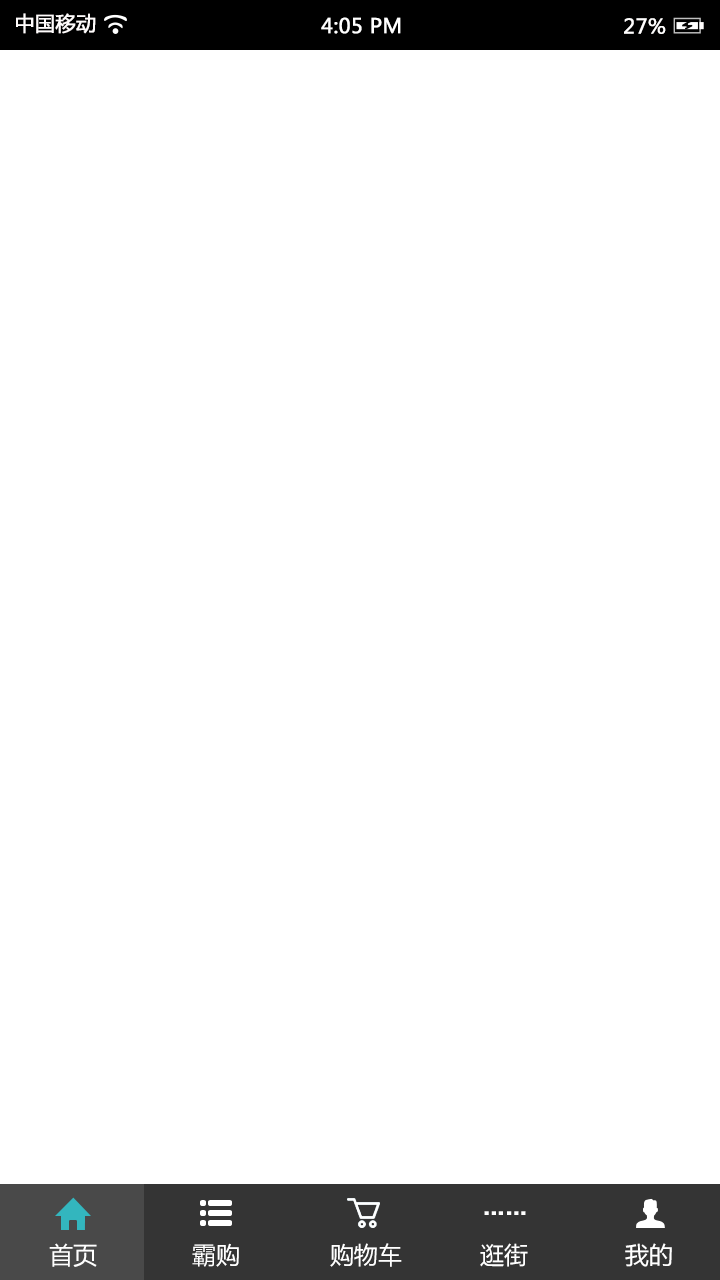
<style>
.page{position:relative;width:720px;height:1280px;background:#ffffff}
.page>*{position:absolute;margin:0}
.t1{font:20px "MicrosoftYaHei";color:#fffcfc;font-weight:bold}
.t2{font:20px "MicrosoftYaHei";color:#ffffff;font-weight:bold}
.t3{font:20px "MicrosoftYaHei";color:#fffefe;font-weight:bold}
.t4{font:24px "MicrosoftYaHei";color:#ffffff}
</style>
<div class="page">
<p class="t1" style="left:16px;top:13px;width:80px;height:21px">中国移动</p>
<p class="t2" style="left:321px;top:17px;width:80px;height:17px">4:05 PM</p>
<p class="t3" style="left:624px;top:18px;width:42px;height:16px">27%</p>
<p class="t4" style="left:49px;top:1243px;width:48px;height:24px">首页</p>
<p class="t4" style="left:192px;top:1243px;width:47px;height:24px">霸购</p>
<p class="t4" style="left:330px;top:1243px;width:72px;height:24px">购物车</p>
<p class="t4" style="left:480px;top:1243px;width:48px;height:24px">逛街</p>
<p class="t4" style="left:625px;top:1243px;width:47px;height:24px">我的</p>
</div>
